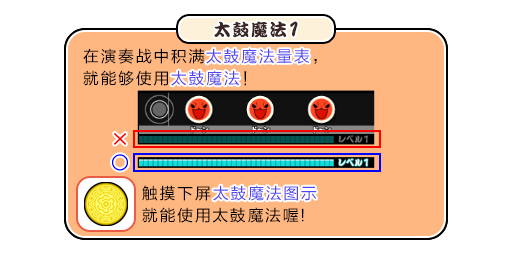
<style>
.page{position:relative;width:512px;height:256px;background:#ffffff}
.page>*{position:absolute;margin:0}
.t1{font:17px "DFPKanTingLiuW9";letter-spacing:0.1em;color:#3b2626}
.t2{font:21.8px "DFPKanTingLiuW9";letter-spacing:0.1em;color:#3b2626;scale:0.87 1}
.t3{font:16px/22px "FZLTHJW--GB1-0";letter-spacing:0.1em;color:#000000}
.t4{font:16px/22px "FZLTHJW--GB1-0";letter-spacing:0.1em;color:#5444ed}
.t5{font:16px "FZLTHJW--GB1-0";letter-spacing:0.1em;color:#5444ed}
</style>
<div class="page">
<p class="t1" style="left:214px;top:21px;width:84px;height:17px">太鼓魔法<span class="t2">1</span></p>
<p class="t3" style="left:83px;top:48px;width:234px;height:38px">在演奏战中积满<span class="t4">太鼓魔法量表</span>，<br>就能够使用<span class="t4">太鼓魔法</span>！</p>
<p class="t5" style="left:206px;top:48px;width:104px;height:16px">太鼓魔法量表</p>
<p class="t5" style="left:171px;top:70px;width:69px;height:16px">太鼓魔法</p>
<p class="t3" style="left:142px;top:185px;width:174px;height:38px">触摸下屏<span class="t4">太鼓魔法图示<br></span>就能使用太鼓魔法喔!</p>
<p class="t5" style="left:213px;top:185px;width:104px;height:16px">太鼓魔法图示</p>
</div>
